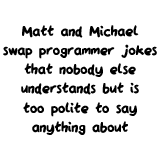
<style>
.page{position:relative;width:160px;height:160px;background:#ffffff}
.page>*{position:absolute;margin:0}
.t1{font:15.9px "QAReports";color:#000000}
</style>
<div class="page">
<p class="t1" style="left:3px;top:25px;width:154px;height:110px;text-align:center">Matt and Michael<br>swap programmer jokes<br>that nobody else<br>understands but is<br>too polite to say<br>anything about</p>
</div>
